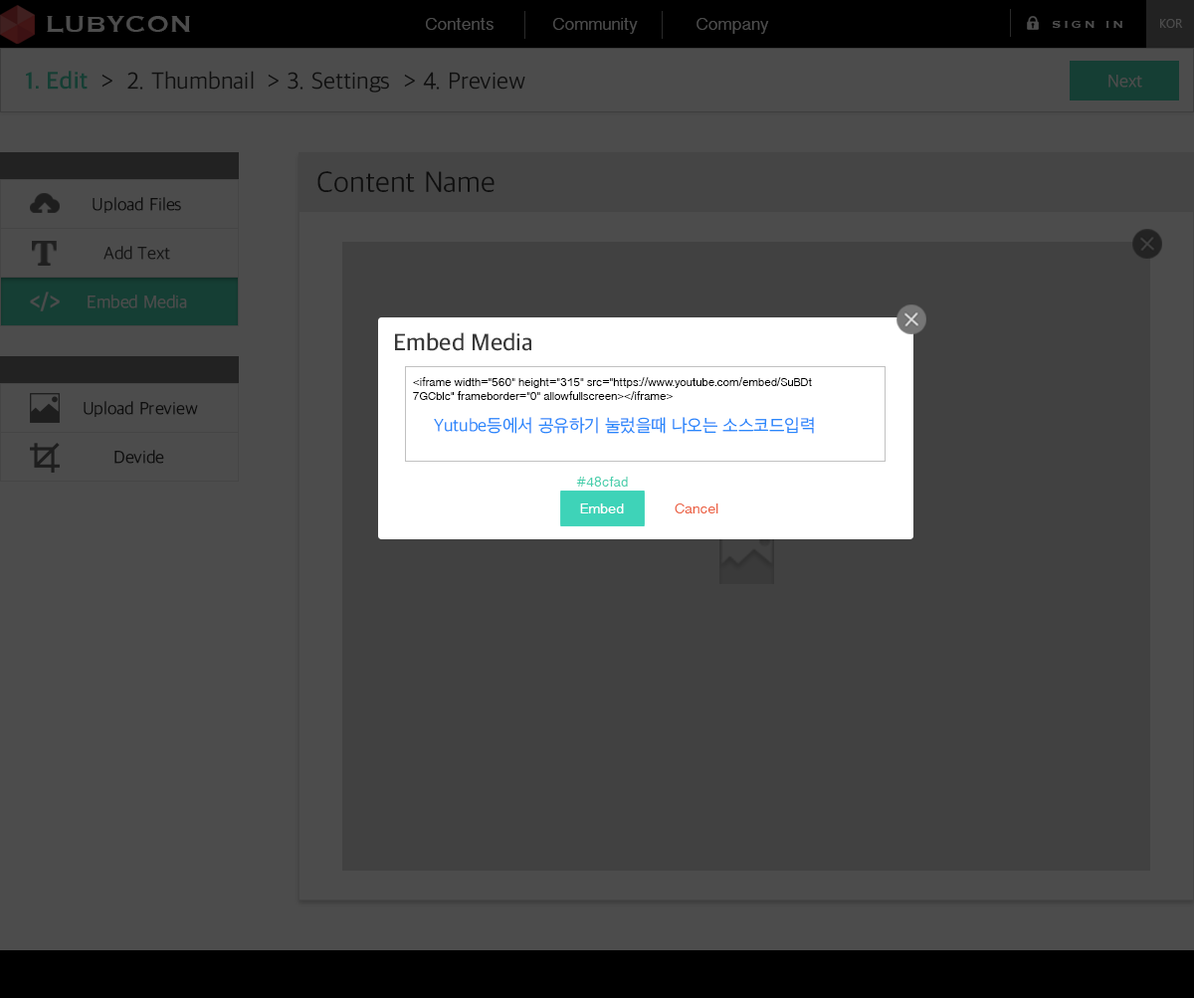
<style>
.page{position:relative;width:1194px;height:999px;background:#4c4c4c}
.page>*{position:absolute;margin:0}
.t1{font:29.8px "Copperplate";color:#4c4c4c}
.t2{font:17.9px "TamilSangamMN";color:#4c4c4c}
.t3{font:13.9px "Copperplate";letter-spacing:0.2em;color:#4c4c4c}
.t4{font:11.9px "LaoUI";color:#4c4c4c}
.t5{font:23.9px "AppleSDGothicNeo-Light";color:#101010}
.t6{font:23.9px "AppleSDGothicNeo-Bold";color:#101010}
.t7{font:17.9px "AppleSDGothicNeo-Light";color:#4c4c4c}
.t8{font:29.8px "AppleSDGothicNeo-Light";color:#0e0e0e}
.t9{font:17.9px "AppleSDGothicNeo-Light";color:#0e0e0e}
.t10{font:17.9px "AppleSDGothicNeo-Light";color:#151515}
.t11{font:23.9px "AppleSDGothicNeo-SemiBold";color:#383838}
.t12{font:11.9px "TamilSangamMN";color:#000000}
.t13{font:17.9px "AppleSDGothicNeo-Light";color:#2987fb}
.t14{font:13.9px "TamilSangamMN";color:#48cfad}
.t15{font:14.9px "TamilSangamMN";color:#ffffff}
.t16{font:14.9px "TamilSangamMN";color:#ec6446}
</style>
<div class="page">
<p class="t1" style="left:47px;top:16px;width:143px;height:17px">LUBYCON</p>
<p class="t2" style="left:426px;top:18px;width:67px;height:12px">Contents</p>
<p class="t2" style="left:553px;top:18px;width:85px;height:16px">Community</p>
<p class="t2" style="left:696px;top:18px;width:73px;height:16px">Company</p>
<p class="t3" style="left:1053px;top:21px;width:69px;height:7px">SIGN IN</p>
<p class="t4" style="left:1160px;top:19px;width:23px;height:9px">KOR</p>
<p class="t5" style="left:26px;top:71px;width:499px;height:22px"><span class="t6">1. Edit  </span>&gt;  2. Thumbnail  &gt; 3. Settings  &gt; 4. Preview</p>
<p class="t7" style="left:1108px;top:75px;width:34px;height:13px">Next</p>
<p class="t8" style="left:317px;top:171px;width:177px;height:21px">Content Name</p>
<p class="t9" style="left:93px;top:197px;width:88px;height:16px">Upload Files</p>
<p class="t10" style="left:103px;top:246px;width:67px;height:14px">Add Text</p>
<p class="t7" style="left:88px;top:294px;width:99px;height:14px">Embed Media</p>
<p class="t11" style="left:395px;top:332px;width:136px;height:19px">Embed Media</p>
<p class="t12" style="left:413px;top:377px;width:399px;height:23px">&lt;iframe width="560" height="315" src="https://www.youtube.com/embed/SuBDt<br>7GCbIc" frameborder="0" allowfullscreen&gt;&lt;/iframe&gt;</p>
<p class="t9" style="left:84px;top:401px;width:114px;height:16px">Upload Preview</p>
<p class="t13" style="left:434px;top:417px;width:380px;height:17px">Yutube등에서 공유하기 눌렀을때 나오는 소스코드입력</p>
<p class="t9" style="left:114px;top:450px;width:50px;height:14px">Devide</p>
<p class="t14" style="left:576px;top:477px;width:52px;height:9px">#48cfad</p>
<p class="t15" style="left:580px;top:503px;width:44px;height:10px">Embed</p>
<p class="t16" style="left:675px;top:503px;width:43px;height:10px">Cancel</p>
</div>
